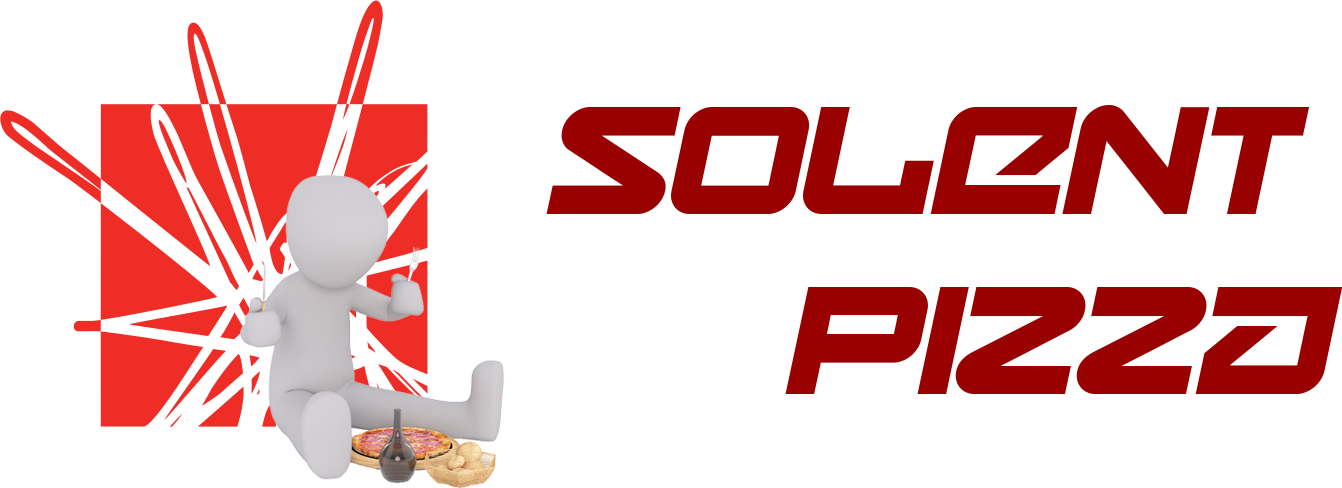
<style>
.page{position:relative;width:1342px;height:488px;background:#ffffff}
.page>*{position:absolute;margin:0}
.t1{font:150px "Onky-Italic";color:#990000}
</style>
<div class="page">
<p class="t1" style="left:546px;top:105px;width:797px;height:289px">SOLENT<br>    PIZZA</p>
</div>
